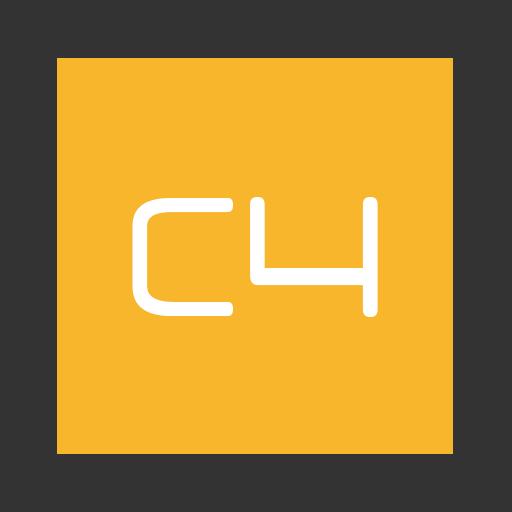
<style>
.page{position:relative;width:512px;height:512px;background:#f8b62c}
.page>*{position:absolute;margin:0}
.t1{font:169px "NeuropolXFree";color:#ffffff;scale:0.83 1}
</style>
<div class="page">
<p class="t1" style="left:132px;top:197px;width:246px;height:120px">C4</p>
</div>
